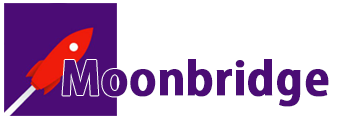
<style>
.page{position:relative;width:342px;height:120px;background:#ffffff}
.page>*{position:absolute;margin:0}
.t1{font:45px "AdobeGothicStd-Bold";color:#4b0c75;font-weight:bold}
</style>
<div class="page">
<p class="t1" style="left:62px;top:59px;width:267px;height:48px">Moonbridge</p>
</div>
